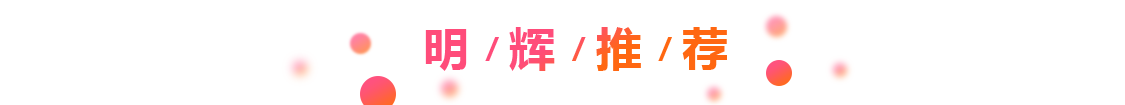
<style>
.page{position:relative;width:1125px;height:105px;background:#ffffff}
.page>*{position:absolute;margin:0}
.t1{font:46px "MicrosoftYaHei-Bold";letter-spacing:0.38em}
.t2{font:27px "MicrosoftYaHei-Bold";letter-spacing:0.38em}
</style>
<div class="page">
<p class="t1" style="left:425px;top:27px;width:302px;height:44px">明<span class="t2">/</span>辉<span class="t2">/</span>推<span class="t2">/</span>荐</p>
</div>
